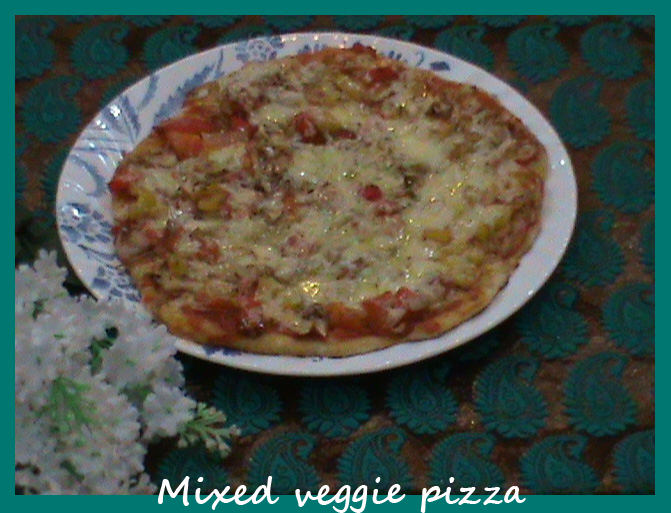
<style>
.page{position:relative;width:671px;height:513px}
.page>*{position:absolute;margin:0}
.t1{font:36px "SegoeScript-Bold";color:#fffdfd}
</style>
<div class="page">
<p class="t1" style="left:158px;top:476px;width:368px;height:37px">Mixed veggie pizza</p>
</div>
